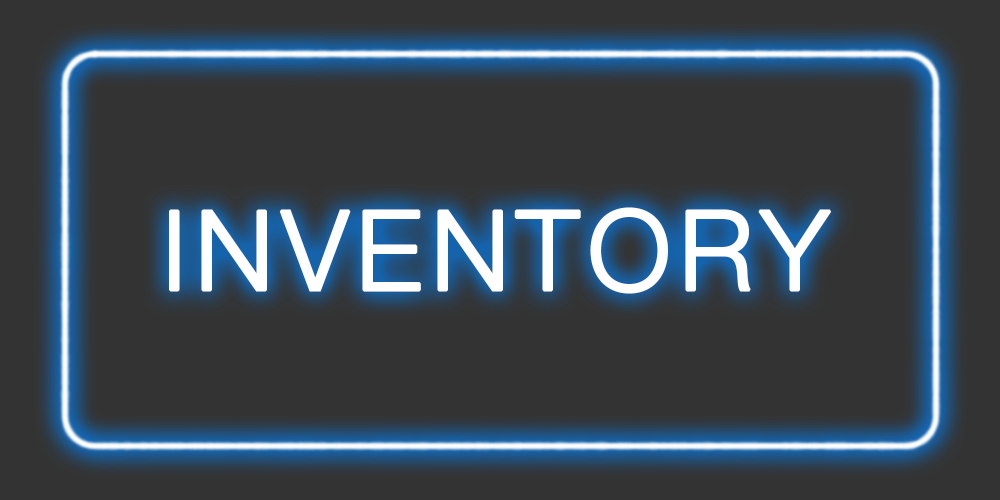
<style>
.page{position:relative;width:1000px;height:500px;background:#333333}
.page>*{position:absolute;margin:0}
.t1{font:111.1px "HelveticaNeue-Light";letter-spacing:0.05em;color:#ffffff;font-weight:bold}
</style>
<div class="page">
<p class="t1" style="left:169px;top:207px;width:663px;height:87px">INVENTORY</p>
</div>
